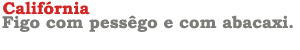
<style>
.page{position:relative;width:300px;height:50px;background:#ffffff}
.page>*{position:absolute;margin:0}
.t1{font:17px "BookmanOldStyle-Bold";color:#d42525}
.t2{font:17px "BookmanOldStyle-Bold";color:#7c7c79}
</style>
<div class="page">
<p class="t1" style="left:3px;top:1px;width:87px;height:14px">Califórnia</p>
<p class="t2" style="left:2px;top:15px;width:291px;height:17px">Figo com pessêgo e com abacaxi.</p>
</div>
